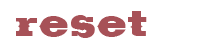
<style>
.page{position:relative;width:200px;height:45px;background:#ffffff}
.page>*{position:absolute;margin:0}
.t1{font:50px "Saddlebag-Black";color:#a75157}
</style>
<div class="page">
<p class="t1" style="left:16px;top:11px;width:131px;height:27px">reset</p>
</div>
